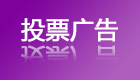
<style>
.page{position:relative;width:140px;height:80px}
.page>*{position:absolute;margin:0}
.t1{font:24.1px "MicrosoftYaHei";color:#ffffff;font-weight:bold}
.t2{font:24.1px "MicrosoftYaHei";font-weight:bold}
</style>
<div class="page">
<p class="t1" style="left:21px;top:18px;width:97px;height:24px">投票广告</p>
<p class="t2" style="left:21px;top:45px;width:97px;height:25px">投票广告</p>
</div>
